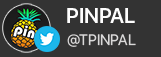
<style>
.page{position:relative;width:161px;height:57px;background:#333333}
.page>*{position:absolute;margin:0}
.t1{font:21.1px "SFProDisplay-Semibold";color:#fefefe}
.t2{font:15px "SFProDisplay-Regular";color:#dad9d9}
</style>
<div class="page">
<p class="t1" style="left:67px;top:8px;width:68px;height:15px">PINPAL</p>
<p class="t2" style="left:67px;top:34px;width:69px;height:13px">@TPINPAL</p>
</div>
